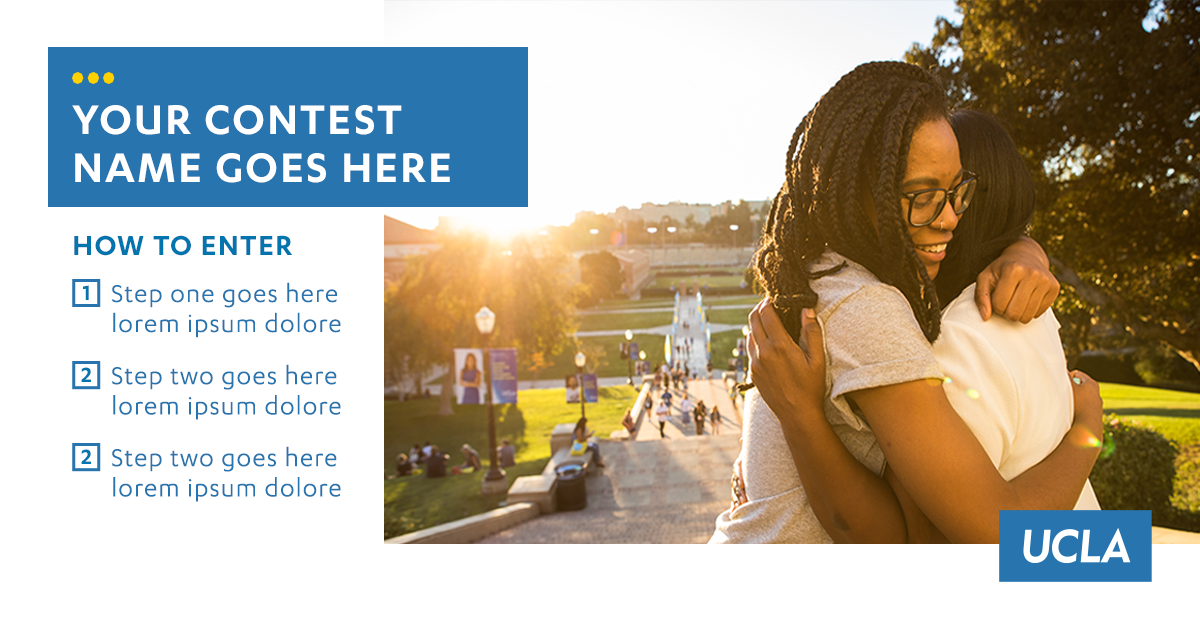
<style>
.page{position:relative;width:1200px;height:630px;background:#ffffff}
.page>*{position:absolute;margin:0}
.t1{font:48px "Karbon-Semibold";letter-spacing:0.04em;color:#ffffff;text-transform:uppercase}
.t2{font:32px "Karbon-Semibold";letter-spacing:0.04em;color:#0274ae}
.t3{font:24px "Karbon-Semibold";letter-spacing:0.075em;color:#0274ae}
.t4{font:28px/30px "Karbon-Regular";letter-spacing:0.04em;color:#2774ae}
.t5{font:28.2px/30.2px "Karbon-Regular";letter-spacing:0.04em;color:#2774ae}
.t6{font:24.2px "Karbon-Semibold";letter-spacing:0.075em;color:#0274ae}
</style>
<div class="page">
<p class="t1" style="left:72px;top:105px;width:378px;height:78px">Your Contest Name Goes here</p>
<p class="t2" style="left:74px;top:235px;width:219px;height:21px">HOW TO ENTER</p>
<p class="t3" style="left:83px;top:285px;width:6px;height:15px">1</p>
<p class="t4" style="left:112px;top:282px;width:229px;height:56px">Step one goes here lorem ipsum dolore</p>
<p class="t5" style="left:112px;top:364px;width:229px;height:56px">Step two goes here lorem ipsum dolore</p>
<p class="t6" style="left:81px;top:367px;width:10px;height:15px">2</p>
<p class="t6" style="left:81px;top:449px;width:10px;height:15px">2</p>
<p class="t5" style="left:112px;top:446px;width:229px;height:56px">Step two goes here lorem ipsum dolore</p>
</div>
